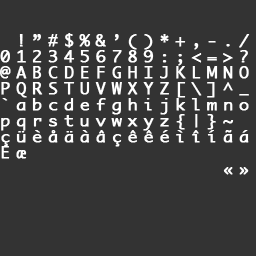
<style>
.page{position:relative;width:256px;height:256px;background:#333333}
.page>*{position:absolute;margin:0}
.t1{font:15.6px/16px "Monaco";letter-spacing:0.32em;color:#ffffff;font-weight:bold;scale:1.08 1}
</style>
<div class="page">
<p class="t1" style="left:0px;top:33px;width:250px;height:142px">!”#$%&amp;’()*+,-./<br>0123456789:;&lt;=&gt;?<br>@ABCDEFGHIJKLMNO<br>PQRSTUVWXYZ[\]^_<br>`abcdefghijklmno<br>pqrstuvwxyz{|}~ <br>çüèåäàâçêêéìîíãá<br>Eæ<br>              «»</p>
</div>
